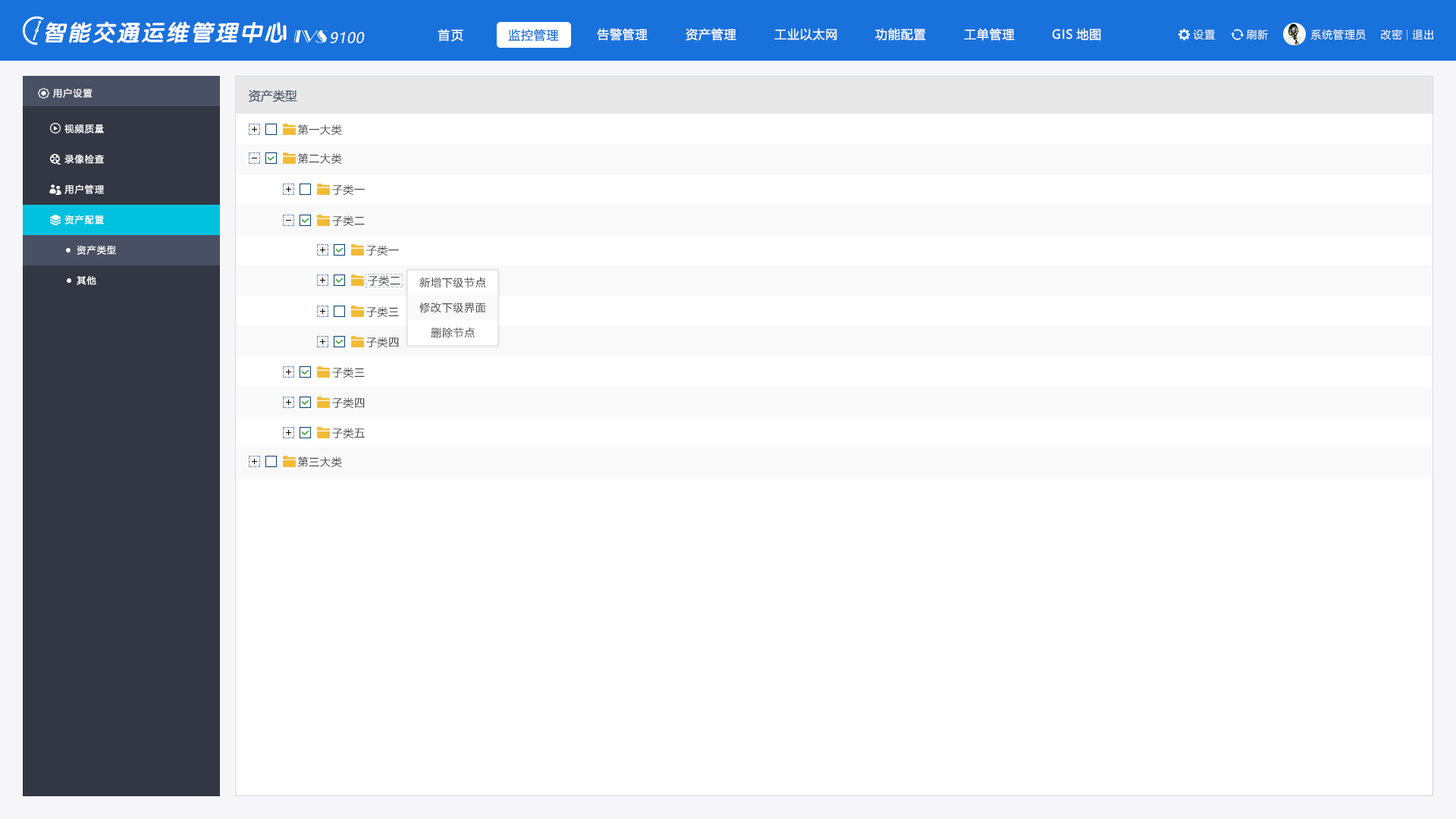
<style>
.page{position:relative;width:1456px;height:819px;background:#ffffff}
.page>*{position:absolute;margin:0}
.t1{font:22.7px "VeraSansYuanTiMono-BoldItalic";letter-spacing:0.08em;color:#ffffff}
.t2{font:12.1px "MicrosoftYaHei";letter-spacing:0.1em;color:#fefeff}
.t3{font:12.1px "MicrosoftYaHei";letter-spacing:0.05em;color:#1971dc}
.t4{font:12.1px "MicrosoftYaHei";letter-spacing:0.05em;color:#ffffff}
.t5{font:10.6px "MicrosoftYaHei";letter-spacing:0.05em;color:#ffffff}
.t6{font:14.2px "MicrosoftYaHei";letter-spacing:0.03em;color:#ffffff;font-style:italic}
.t7{font:9.1px "MicrosoftYaHei";letter-spacing:0.1em;color:#ffffff}
.t8{font:12.1px "MicrosoftYaHei";color:#4c5a6d}
.t9{font:10.6px "MicrosoftYaHei";letter-spacing:0.05em;color:#474747}
</style>
<div class="page">
<p class="t1" style="left:45px;top:21px;width:242px;height:22px">智能交通运维管理中心</p>
<p class="t2" style="left:438px;top:29px;width:25px;height:13px">首页</p>
<p class="t3" style="left:508px;top:29px;width:51px;height:13px">监控管理</p>
<p class="t4" style="left:597px;top:28px;width:51px;height:13px">告警管理</p>
<p class="t4" style="left:686px;top:28px;width:50px;height:13px">资产管理</p>
<p class="t4" style="left:774px;top:28px;width:63px;height:13px">工业以太网</p>
<p class="t4" style="left:875px;top:28px;width:51px;height:13px">功能配置</p>
<p class="t4" style="left:964px;top:28px;width:51px;height:13px">工单管理</p>
<p class="t4" style="left:1053px;top:28px;width:48px;height:13px">GIS地图</p>
<p class="t5" style="left:1193px;top:30px;width:23px;height:10px">设置</p>
<p class="t5" style="left:1246px;top:29px;width:22px;height:11px">刷新</p>
<p class="t5" style="left:1310px;top:29px;width:56px;height:11px">系统管理员</p>
<p class="t5" style="left:1381px;top:29px;width:21px;height:11px">改密</p>
<p class="t5" style="left:1412px;top:30px;width:21px;height:10px">退出</p>
<p class="t6" style="left:330px;top:32px;width:35px;height:11px">9100</p>
<p class="t7" style="left:53px;top:88px;width:40px;height:10px">用户设置</p>
<p class="t8" style="left:248px;top:89px;width:49px;height:13px">资产类型</p>
<p class="t7" style="left:64px;top:124px;width:40px;height:9px">视频质量</p>
<p class="t9" style="left:297px;top:124px;width:45px;height:11px">第一大类</p>
<p class="t7" style="left:64px;top:154px;width:40px;height:10px">录像检查</p>
<p class="t9" style="left:297px;top:153px;width:45px;height:11px">第二大类</p>
<p class="t7" style="left:64px;top:184px;width:40px;height:10px">用户管理</p>
<p class="t9" style="left:332px;top:184px;width:33px;height:11px">子类一</p>
<p class="t7" style="left:64px;top:215px;width:40px;height:9px">资产配置</p>
<p class="t9" style="left:332px;top:215px;width:33px;height:11px">子类二</p>
<p class="t7" style="left:77px;top:245px;width:39px;height:10px">资产类型</p>
<p class="t9" style="left:366px;top:245px;width:33px;height:11px">子类一</p>
<p class="t7" style="left:77px;top:275px;width:19px;height:10px">其他</p>
<p class="t9" style="left:368px;top:275px;width:32px;height:11px">子类二</p>
<p class="t9" style="left:419px;top:277px;width:67px;height:11px">新增下级节点</p>
<p class="t9" style="left:419px;top:302px;width:67px;height:11px">修改下级界面</p>
<p class="t9" style="left:366px;top:306px;width:33px;height:11px">子类三</p>
<p class="t9" style="left:431px;top:327px;width:44px;height:11px">删除节点</p>
<p class="t9" style="left:366px;top:337px;width:33px;height:10px">子类四</p>
<p class="t9" style="left:332px;top:367px;width:33px;height:11px">子类三</p>
<p class="t9" style="left:332px;top:397px;width:33px;height:11px">子类四</p>
<p class="t9" style="left:332px;top:428px;width:33px;height:10px">子类五</p>
<p class="t9" style="left:297px;top:457px;width:45px;height:10px">第三大类</p>
</div>
